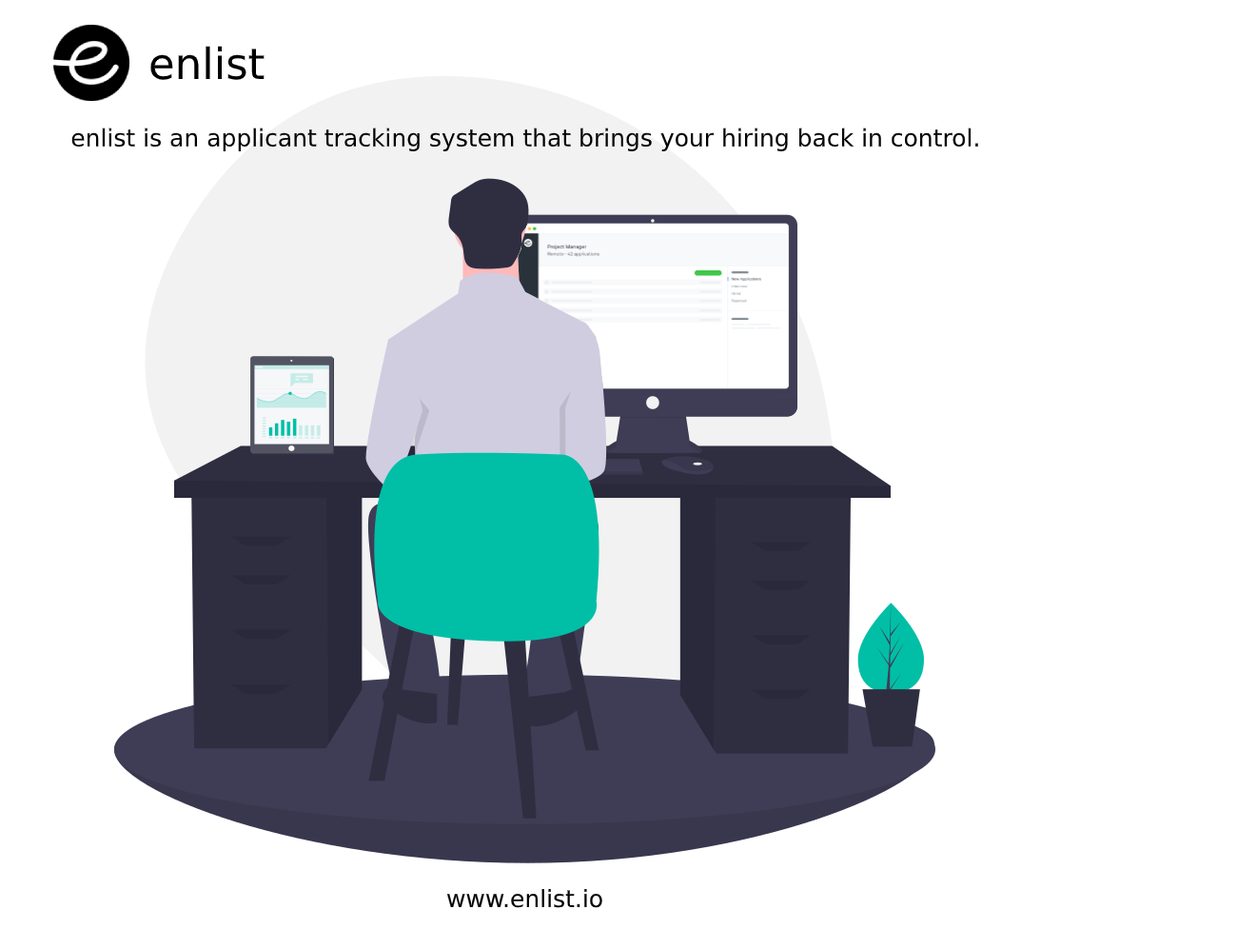
<style>
.page{position:relative;width:1257px;height:949px;background:#ffffff}
.page>*{position:absolute;margin:0}
.t1{font:42.8px "DejaVuSans";color:#000000}
.t2{font:23.8px "DejaVuSans";color:#000000}
</style>
<div class="page">
<p class="t1" style="left:150px;top:46px;width:115px;height:34px">enlist</p>
<p class="t2" style="left:71px;top:128px;width:907px;height:23px">enlist is an applicant tracking system that brings your hiring back in control.</p>
<p class="t2" style="left:447px;top:889px;width:155px;height:19px">www.enlist.io</p>
</div>
